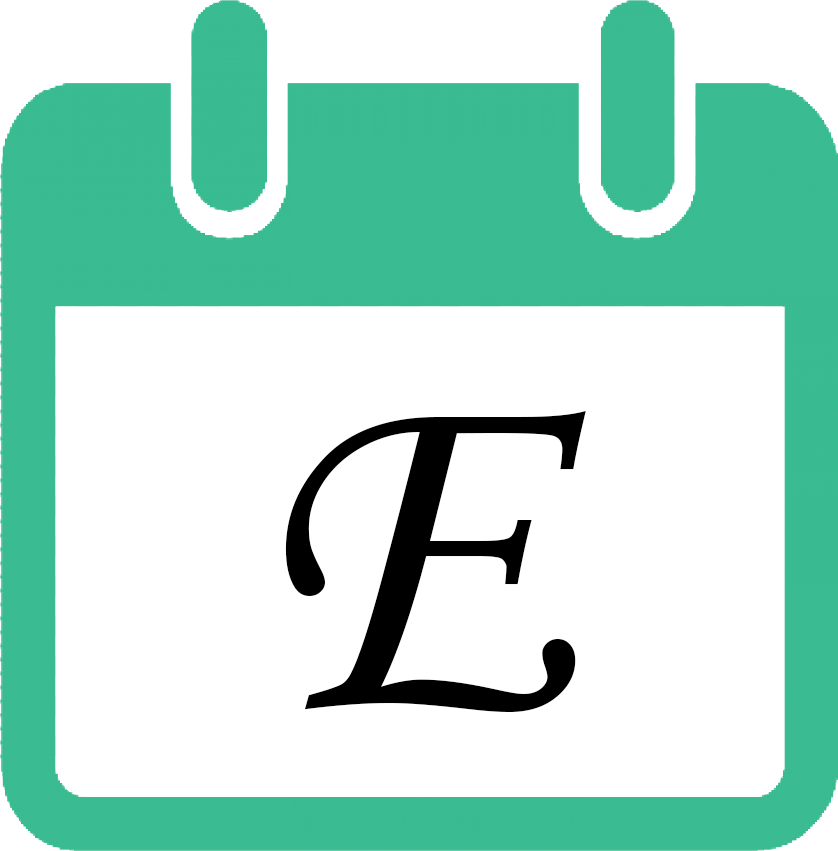
<style>
.page{position:relative;width:838px;height:851px;background:#ffffff}
.page>*{position:absolute;margin:0}
.t1{font:500px "MonotypeCorsiva";color:#000000}
</style>
<div class="page">
<p class="t1" style="left:285px;top:411px;width:301px;height:301px">E</p>
</div>
